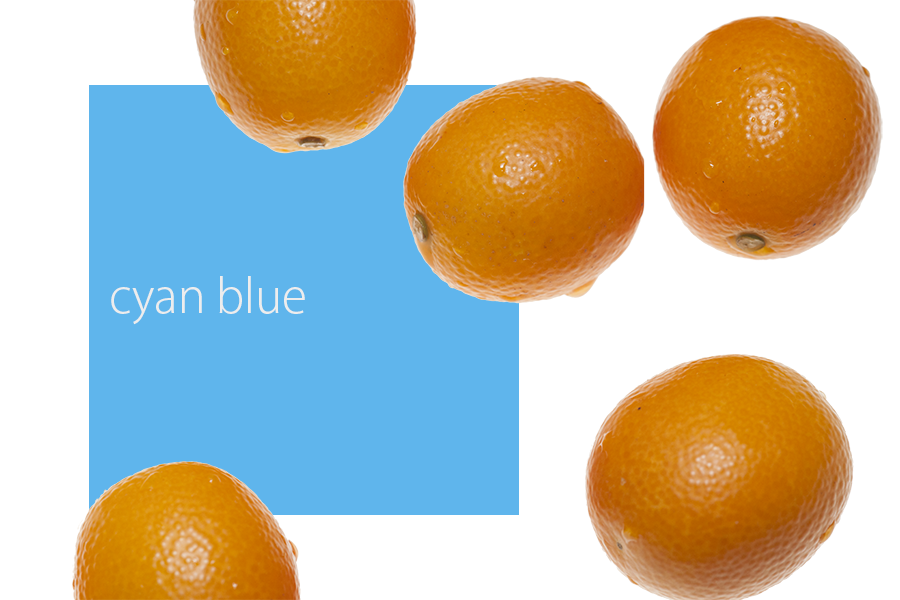
<style>
.page{position:relative;width:900px;height:600px;background:#ffffff}
.page>*{position:absolute;margin:0}
.t1{font:45.8px "KozGoPro-Light";color:#ededed}
</style>
<div class="page">
<p class="t1" style="left:111px;top:276px;width:194px;height:49px">cyan blue</p>
</div>
